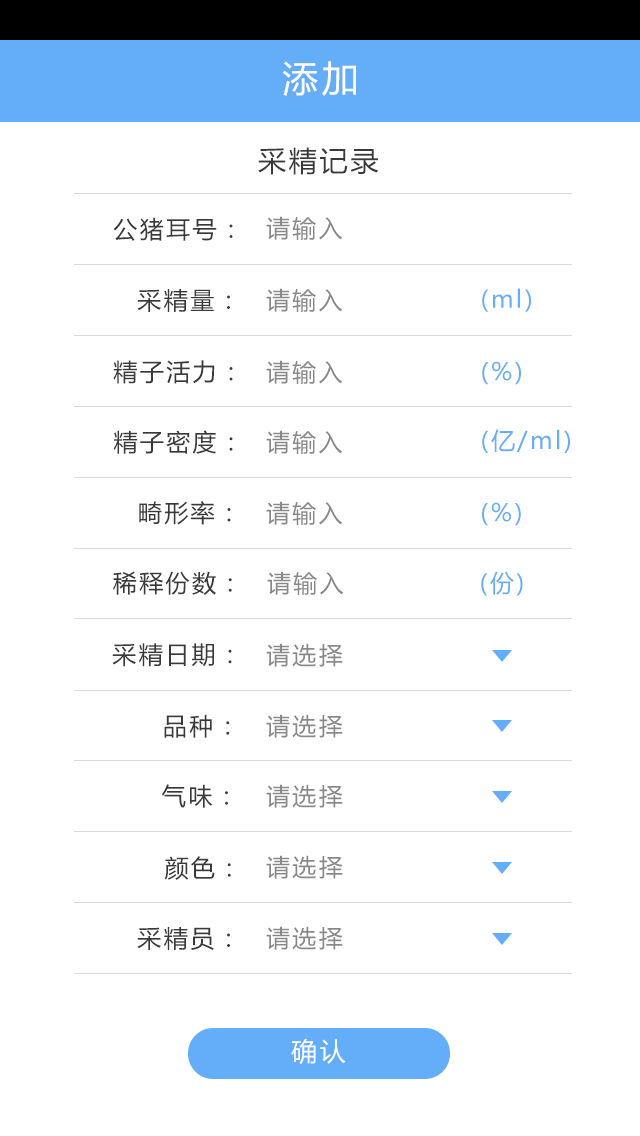
<style>
.page{position:relative;width:640px;height:1136px;background:#ffffff}
.page>*{position:absolute;margin:0}
.t1{font:36px "MicrosoftYaHei";letter-spacing:0.1em;color:#ffffff}
.t2{font:28px "MicrosoftYaHei";letter-spacing:0.1em;color:#3a3939}
.t3{font:24px "MicrosoftYaHei";letter-spacing:0.1em;color:#3a3939}
.t4{font:24px "MicrosoftYaHei";letter-spacing:0.1em;color:#898888}
.t5{font:24px "MicrosoftYaHei";letter-spacing:0.1em;color:#64adf9}
.t6{font:26px "MicrosoftYaHei";letter-spacing:0.1em;color:#ffffff}
</style>
<div class="page">
<p class="t1" style="left:282px;top:61px;width:74px;height:35px">添加</p>
<p class="t2" style="left:258px;top:147px;width:121px;height:28px">采精记录</p>
<p class="t3" style="left:113px;top:217px;width:120px;height:24px">公猪耳号：</p>
<p class="t4" style="left:266px;top:216px;width:77px;height:24px">请输入</p>
<p class="t3" style="left:137px;top:289px;width:93px;height:23px">采精量：</p>
<p class="t4" style="left:266px;top:288px;width:77px;height:24px">请输入</p>
<p class="t5" style="left:482px;top:288px;width:49px;height:24px">(ml)</p>
<p class="t3" style="left:113px;top:360px;width:120px;height:24px">精子活力：</p>
<p class="t4" style="left:266px;top:360px;width:77px;height:24px">请输入</p>
<p class="t5" style="left:482px;top:361px;width:39px;height:24px">(%)</p>
<p class="t3" style="left:113px;top:430px;width:120px;height:24px">精子密度：</p>
<p class="t4" style="left:266px;top:430px;width:77px;height:24px">请输入</p>
<p class="t5" style="left:482px;top:429px;width:88px;height:24px">(亿/ml)</p>
<p class="t3" style="left:139px;top:501px;width:92px;height:24px">畸形率：</p>
<p class="t4" style="left:266px;top:501px;width:77px;height:24px">请输入</p>
<p class="t5" style="left:482px;top:502px;width:39px;height:24px">(%)</p>
<p class="t3" style="left:113px;top:571px;width:119px;height:24px">稀释份数：</p>
<p class="t4" style="left:267px;top:571px;width:77px;height:24px">请输入</p>
<p class="t5" style="left:481px;top:571px;width:42px;height:25px">(份)</p>
<p class="t3" style="left:112px;top:643px;width:120px;height:24px">采精日期：</p>
<p class="t4" style="left:266px;top:643px;width:77px;height:24px">请选择</p>
<p class="t3" style="left:164px;top:714px;width:66px;height:24px">品种：</p>
<p class="t4" style="left:266px;top:714px;width:77px;height:24px">请选择</p>
<p class="t3" style="left:162px;top:784px;width:66px;height:24px">气味：</p>
<p class="t4" style="left:266px;top:784px;width:77px;height:24px">请选择</p>
<p class="t3" style="left:164px;top:856px;width:67px;height:24px">颜色：</p>
<p class="t4" style="left:266px;top:855px;width:77px;height:24px">请选择</p>
<p class="t3" style="left:137px;top:927px;width:93px;height:23px">采精员：</p>
<p class="t4" style="left:266px;top:926px;width:77px;height:24px">请选择</p>
<p class="t6" style="left:291px;top:1038px;width:55px;height:27px">确认</p>
</div>
